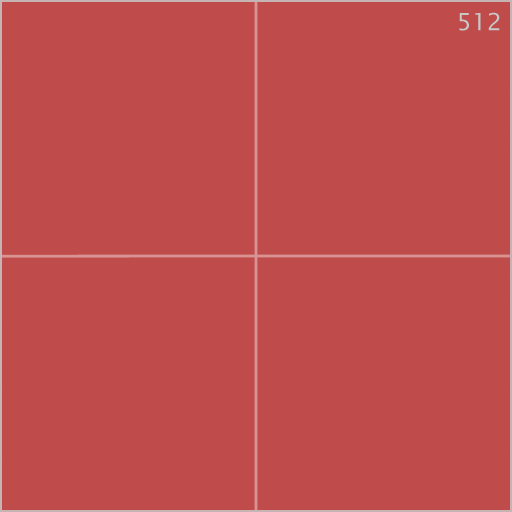
<style>
.page{position:relative;width:512px;height:512px;background:#bf4b4b}
.page>*{position:absolute;margin:0}
.t1{font:24px "LucidaSans";color:#c8c8c8;text-transform:uppercase}
</style>
<div class="page">
<p class="t1" style="left:459px;top:12px;width:41px;height:19px">512</p>
</div>
